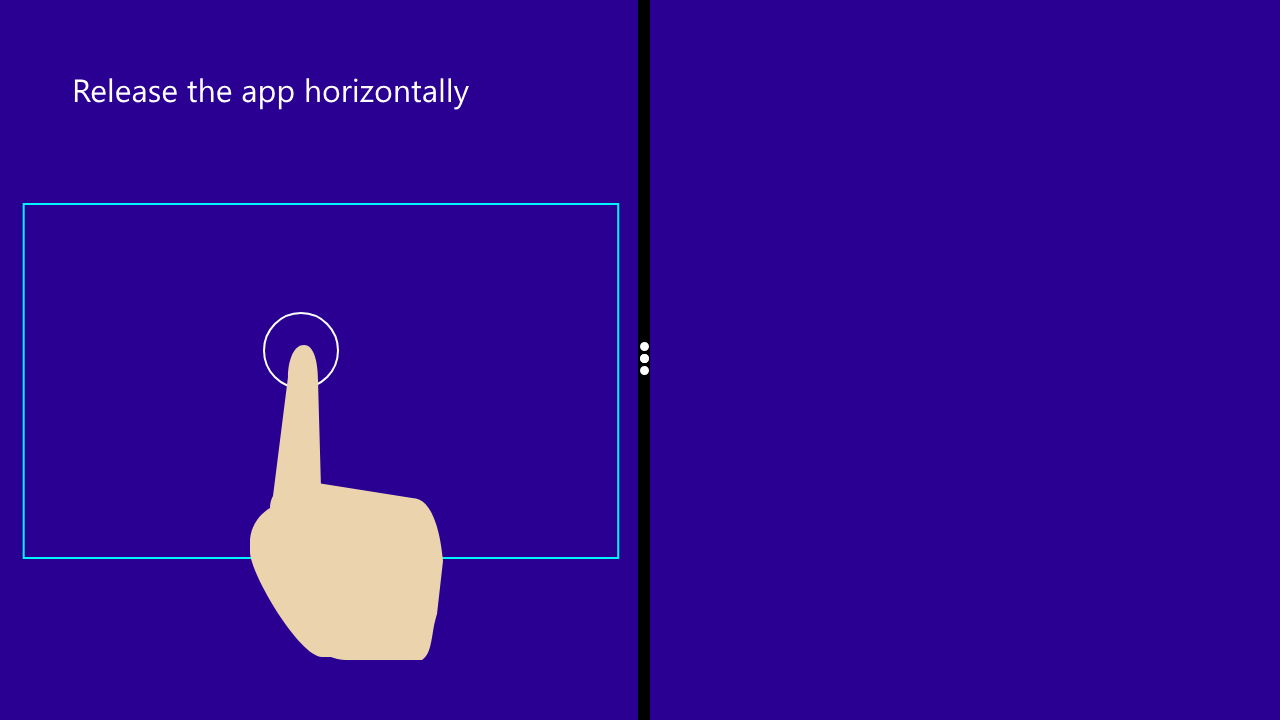
<style>
.page{position:relative;width:1280px;height:720px;background:#2a0093}
.page>*{position:absolute;margin:0}
.t1{font:32px "SegoeUI";color:#ffffff}
</style>
<div class="page">
<p class="t1" style="left:74px;top:78px;width:395px;height:32px">Release the app horizontally</p>
</div>
